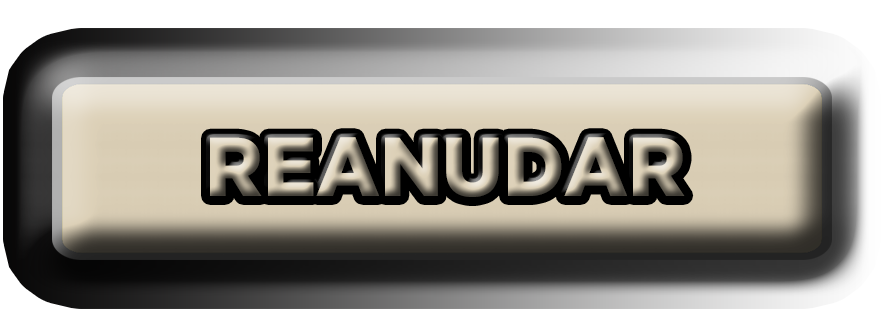
<style>
.page{position:relative;width:883px;height:334px}
.page>*{position:absolute;margin:0}
.t1{font:83.4px "GothamBlack";scale:0.96 1}
</style>
<div class="page">
<p class="t1" style="left:210px;top:137px;width:475px;height:60px">REANUDAR</p>
</div>
